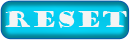
<style>
.page{position:relative;width:130px;height:40px}
.page>*{position:absolute;margin:0}
.t1{font:20.8px "GoudyStout";color:#f4f4f4}
</style>
<div class="page">
<p class="t1" style="left:5px;top:11px;width:122px;height:17px">reset</p>
</div>
